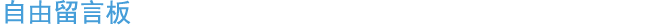
<style>
.page{position:relative;width:660px;height:25px;background:#ffffff}
.page>*{position:absolute;margin:0}
.t1{font:26px "SimHei";color:#469ed9}
</style>
<div class="page">
<p class="t1" style="left:5px;top:0px;width:126px;height:25px">自由留言板</p>
</div>
